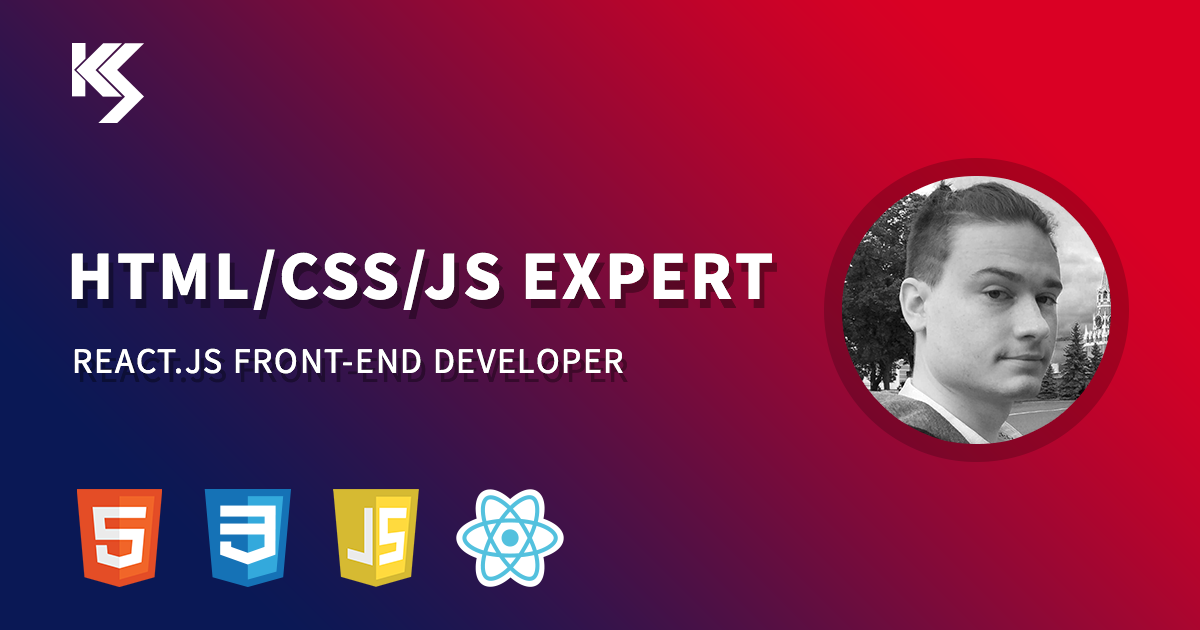
<style>
.page{position:relative;width:1200px;height:630px}
.page>*{position:absolute;margin:0}
.t1{font:68.7px "SourceSansPro-Bold";letter-spacing:0.05em;color:#ffffff;text-transform:uppercase}
.t2{font:35.5px "SourceSansPro-Regular";letter-spacing:0.05em;color:#ffffff;text-transform:uppercase}
</style>
<div class="page">
<p class="t1" style="left:71px;top:249px;width:701px;height:61px">HTML/CSS/JS EXPERT</p>
<p class="t2" style="left:74px;top:348px;width:549px;height:26px">REACT.JS FRONT-END DEVELOPER</p>
</div>
